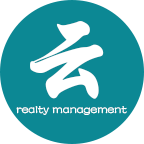
<style>
.page{position:relative;width:144px;height:144px;background:#0c8894}
.page>*{position:absolute;margin:0}
.t1{font:108.3px "STXingkai";color:#ffffff}
.t2{font:12.5px "FZSTK--GBK1-0";color:#ffffff}
</style>
<div class="page">
<p class="t1" style="left:30px;top:21px;width:74px;height:78px">云</p>
<p class="t2" style="left:16px;top:106px;width:111px;height:9px">realty management</p>
</div>
